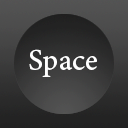
<style>
.page{position:relative;width:128px;height:128px}
.page>*{position:absolute;margin:0}
.t1{font:30px "AdobeHebrew-Regular";color:#ffffff}
</style>
<div class="page">
<p class="t1" style="left:29px;top:49px;width:68px;height:28px">Space</p>
</div>
